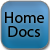
<style>
.page{position:relative;width:50px;height:50px}
.page>*{position:absolute;margin:0}
.t1{font:16px/14px "MyriadPro-Regular";color:#000000}
</style>
<div class="page">
<p class="t1" style="left:5px;top:12px;width:39px;height:25px;text-align:center">Home<br>Docs</p>
</div>
